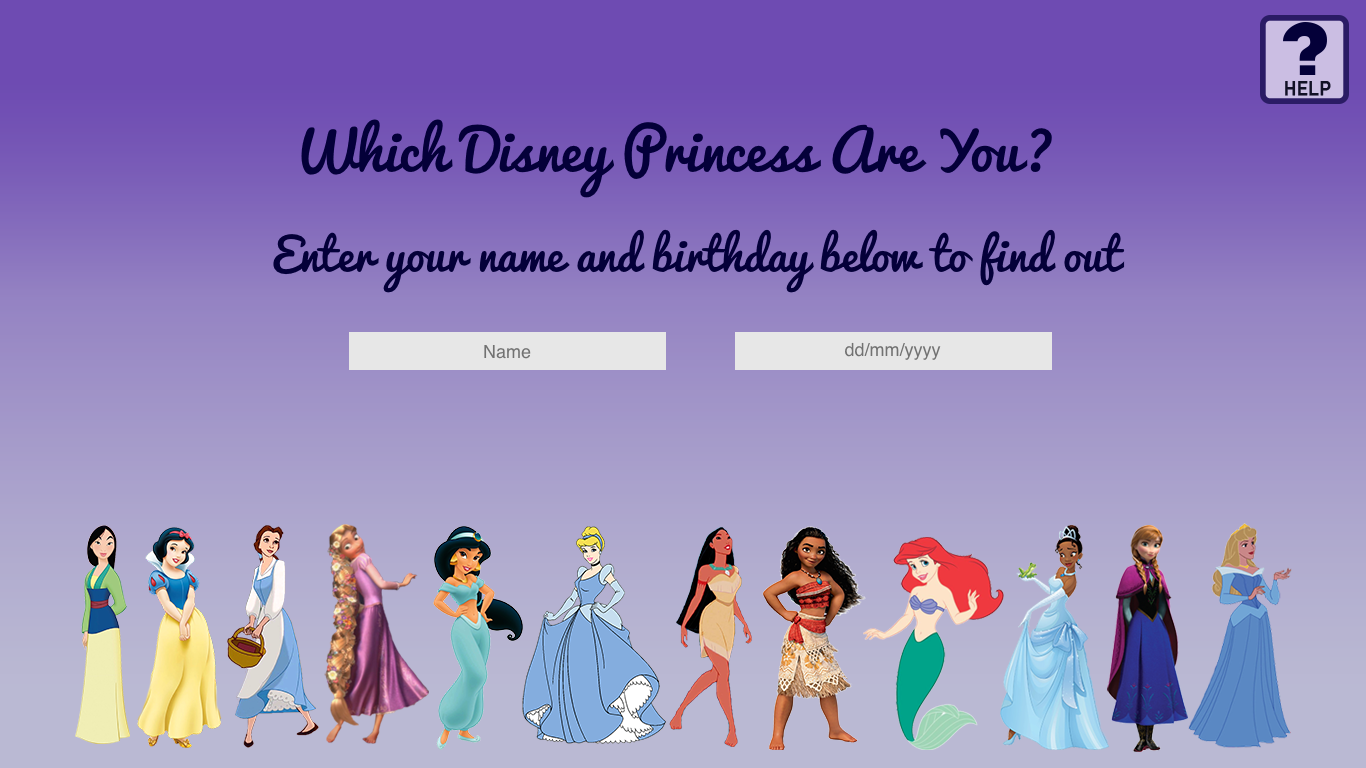
<style>
.page{position:relative;width:1366px;height:768px}
.page>*{position:absolute;margin:0}
.t1{font:18.9px "DINAlternate-Bold";color:#121126;font-weight:bold}
.t2{font:56px "Pacifico-Regular";color:#040039}
.t3{font:45px "Pacifico-Regular";color:#040039}
.t4{font:18px "Helvetica";color:#727272}
.t5{font:16px "Helvetica";color:#727272}
</style>
<div class="page">
<p class="t1" style="left:1285px;top:81px;width:46px;height:15px">HELP</p>
<p class="t2" style="left:301px;top:119px;width:751px;height:79px">Which Disney Princess Are You?</p>
<p class="t3" style="left:273px;top:229px;width:852px;height:64px">Enter your name and birthday below to find out</p>
<p class="t4" style="left:845px;top:342px;width:96px;height:18px">dd/mm/yyyy</p>
<p class="t4" style="left:484px;top:345px;width:47px;height:14px"><span class="t5"><br></span>Name</p>
</div>
